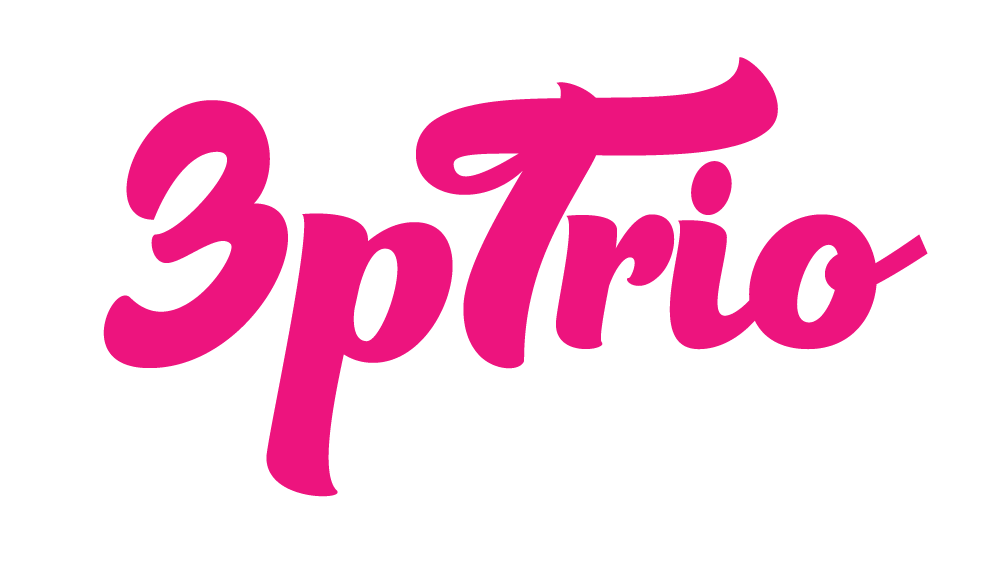
<style>
.page{position:relative;width:1000px;height:569px;background:#ffffff}
.page>*{position:absolute;margin:0}
.t1{font:480.3px "GazillionsScriptFont-Regular";color:#ed147e}
.t2{font:535.5px "GazillionsScriptFont-Regular";color:#ed147e}
</style>
<div class="page">
<p class="t1" style="left:416px;top:57px;width:512px;height:312px">Trio</p>
<p class="t2" style="left:103px;top:100px;width:350px;height:397px">3p</p>
</div>
